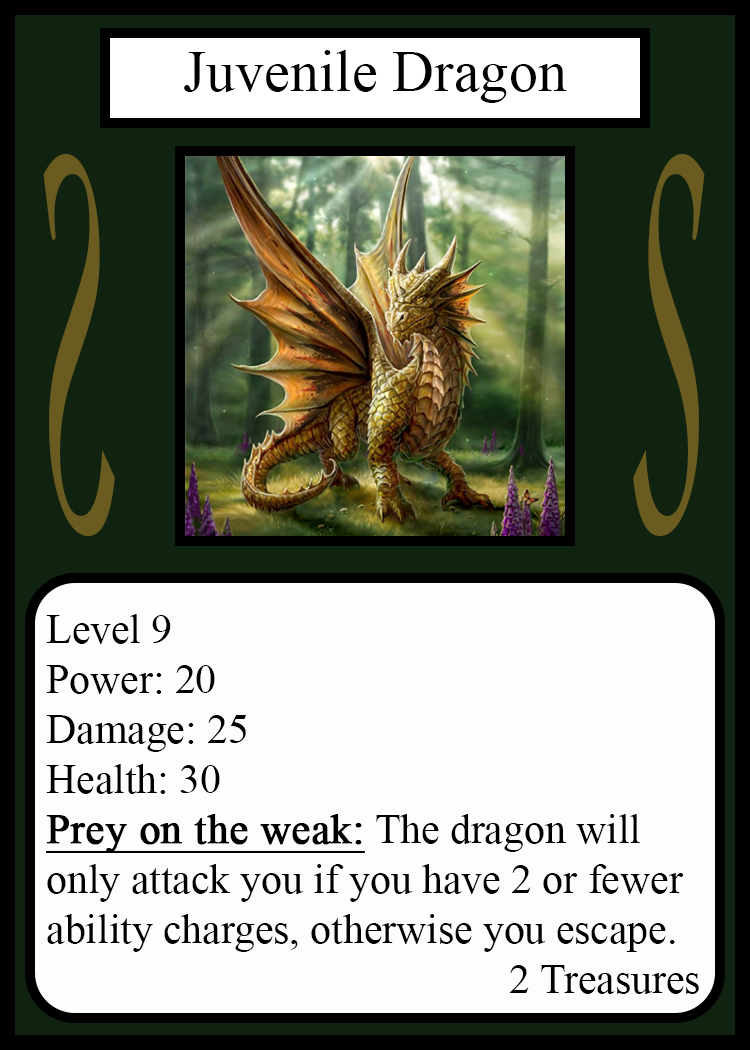
<style>
.page{position:relative;width:750px;height:1050px;background:#fffcfc}
.page>*{position:absolute;margin:0}
.t1{font:58.3px "TimesNewRomanPSMT";color:#010101}
.t2{font:548.5px "Apple-Chancery";color:#6a5c21;scale:0.27 1}
.t3{font:548.2px "Apple-Chancery";color:#6a5c21;scale:0.27 1}
.t4{font:41.7px "TimesNewRomanPSMT";color:#000000}
.t5{font:41.7px "TimesNewRomanPSMT";color:#000000;font-weight:bold;text-decoration:underline}
</style>
<div class="page">
<p class="t1" style="left:184px;top:50px;width:383px;height:53px">Juvenile Dragon</p>
<p class="t2" style="left:43px;top:154px;width:72px;height:382px;rotate:180deg">S</p>
<p class="t3" style="left:633px;top:154px;width:72px;height:382px">S</p>
<p class="t4" style="left:46px;top:614px;width:653px;height:380px">Level 9<br>Power: 20<br>Damage: 25<br>Health: 30<br><span class="t5">Prey on the weak:</span> The dragon will<br>only attack you if you have 2 or fewer<br>ability charges, otherwise you escape.<br>                   2 Treasures</p>
</div>
